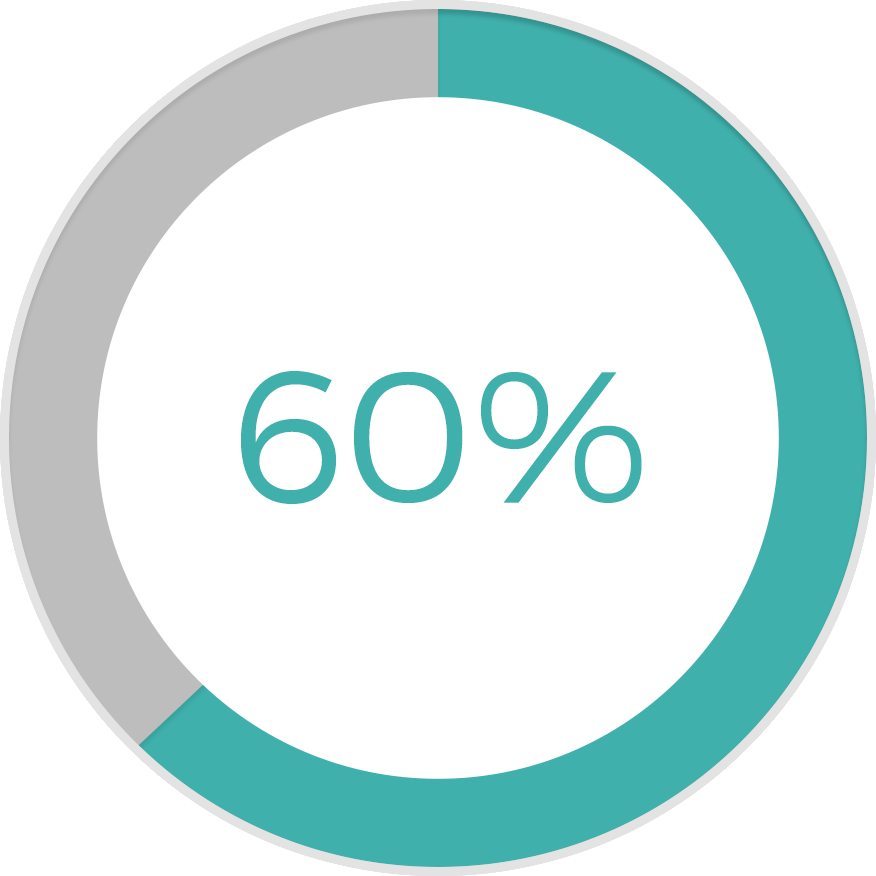
<style>
.page{position:relative;width:876px;height:876px;background:#ffffff}
.page>*{position:absolute;margin:0}
.t1{font:187.4px "Montserrat-Light";color:#3fb0ac}
</style>
<div class="page">
<p class="t1" style="left:239px;top:371px;width:404px;height:133px">80%</p>
<p class="t1" style="left:240px;top:371px;width:402px;height:133px">90%</p>
<p class="t1" style="left:241px;top:371px;width:401px;height:133px">60%</p>
<p class="t1" style="left:243px;top:372px;width:394px;height:131px">70%</p>
</div>
